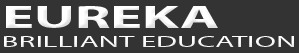
<style>
.page{position:relative;width:299px;height:53px;background:#333333}
.page>*{position:absolute;margin:0}
.t1{font:16.4px "MyriadPro-Regular";color:#ffffff;scale:1.9 1}
.t2{font:31.7px "MyriadPro-Bold";color:#ffffff;scale:1.9 1}
</style>
<div class="page">
<p class="t1" style="left:4px;top:6px;width:290px;height:41px"><span class="t2">EUREKA<br></span>BRILLIANT EDUCATION</p>
</div>
